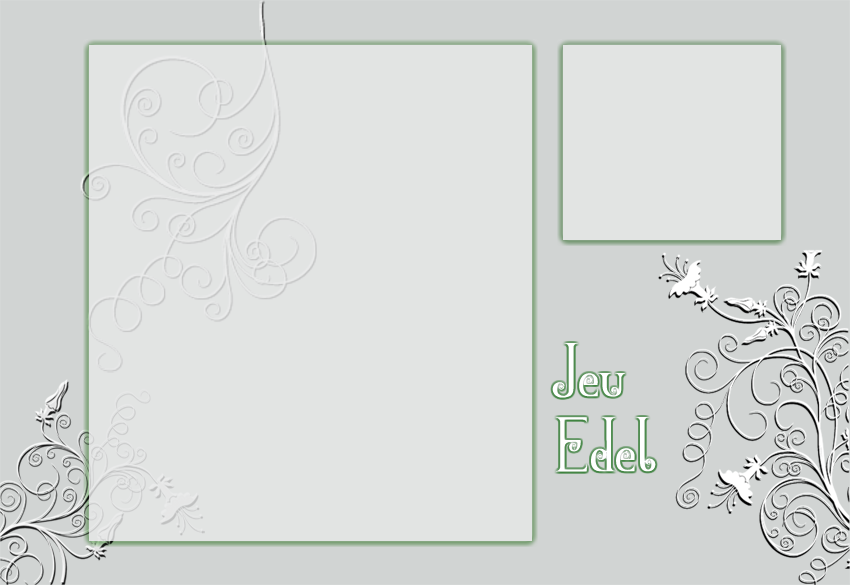
<style>
.page{position:relative;width:850px;height:585px;background:#e2e4e3}
.page>*{position:absolute;margin:0}
.t1{font:83.3px "BlackFlowersBlossom";color:#ffffff}
</style>
<div class="page">
<p class="t1" style="left:552px;top:343px;width:74px;height:55px">Jeu</p>
<p class="t1" style="left:555px;top:417px;width:101px;height:55px">Edel</p>
</div>
